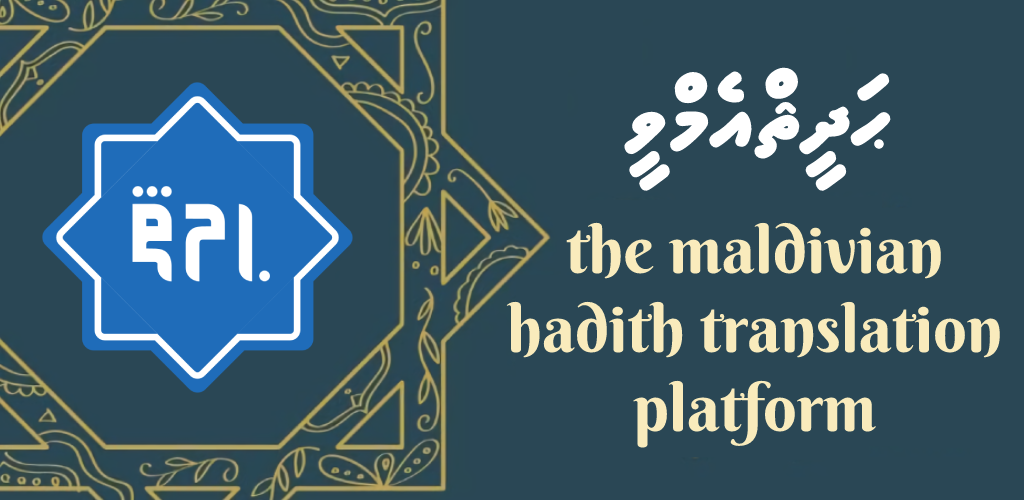
<style>
.page{position:relative;width:1024px;height:500px;background:#2a4755}
.page>*{position:absolute;margin:0}
.t1{font:88px "MVAaamuFK";color:#ffffff}
.t2{font:66px "BerkshireSwash-Regular";color:#f9ebbc}
</style>
<div class="page">
<p class="t1" style="left:624px;top:67px;width:267px;height:124px">ޙަދީޘްއެމްވީ</p>
<p class="t2" style="left:506px;top:222px;width:494px;height:226px;text-align:center">the maldivian<br>hadith translation<br>platform</p>
</div>
